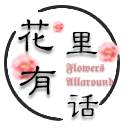
<style>
.page{position:relative;width:130px;height:130px;background:#ffffff}
.page>*{position:absolute;margin:0}
.t1{font:39.9px "HGLB_CNKI";letter-spacing:0.08em;color:#000000}
.t2{font:30.7px "HGLB_CNKI";letter-spacing:0.08em;color:#000000;scale:1.13 1}
.t3{font:39px "HGLB_CNKI";letter-spacing:0.08em;color:#000000;scale:1.07 1}
.t4{font:10px "HGBD_CNKI";color:#ea7b82}
.t5{font:32.5px "HGLB_CNKI";letter-spacing:0.08em;color:#000000}
</style>
<div class="page">
<p class="t1" style="left:18px;top:19px;width:36px;height:33px">花</p>
<p class="t2" style="left:66px;top:31px;width:32px;height:24px">里</p>
<p class="t3" style="left:19px;top:65px;width:37px;height:31px">有</p>
<p class="t4" style="left:66px;top:63px;width:39px;height:11px">Flowers</p>
<p class="t4" style="left:66px;top:77px;width:48px;height:9px">Allaround</p>
<p class="t5" style="left:67px;top:94px;width:32px;height:23px">话</p>
</div>
